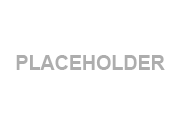
<style>
.page{position:relative;width:180px;height:120px;background:#ffffff}
.page>*{position:absolute;margin:0}
.t1{font:19.6px "Arial-BoldMT";color:#adadad}
</style>
<div class="page">
<p class="t1" style="left:16px;top:55px;width:149px;height:15px">PLACEHOLDER</p>
</div>
